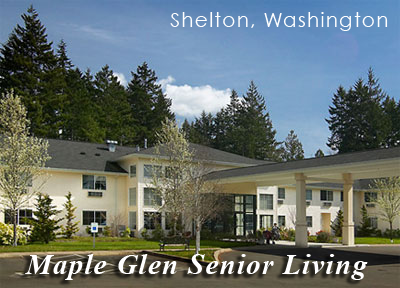
<style>
.page{position:relative;width:400px;height:288px}
.page>*{position:absolute;margin:0}
.t1{font:20.4px "CenturyGothic";letter-spacing:0.05em;color:#ffffff}
.t2{font:28.6px "TimesNewRomanPS-BoldItalicMT";letter-spacing:0.05em;color:#ffffff}
</style>
<div class="page">
<p class="t1" style="left:170px;top:12px;width:218px;height:19px">Shelton, Washington</p>
<p class="t2" style="left:25px;top:254px;width:343px;height:26px">Maple Glen Senior Living</p>
</div>
